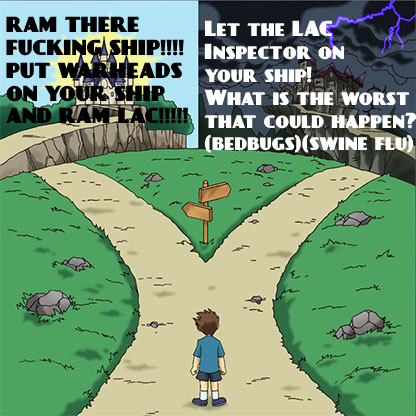
<style>
.page{position:relative;width:416px;height:416px}
.page>*{position:absolute;margin:0}
.t1{font:19px "DayPosterBlack";color:#000000}
.t2{font:19px "DayPosterBlack";color:#ffffff}
</style>
<div class="page">
<p class="t1" style="left:6px;top:16px;width:182px;height:108px">RAM THERE <br>FUCKING SHIP!!!!<br>PUT WARHEADS<br>ON YOUR SHIP<br>AND RAM LAC!!!!!</p>
<p class="t2" style="left:204px;top:20px;width:213px;height:133px">Let the LAC<br>Inspector on <br>your ship!<br>What is the worst<br>that could happen?<br>(bedbugs)(swine flu)</p>
</div>
